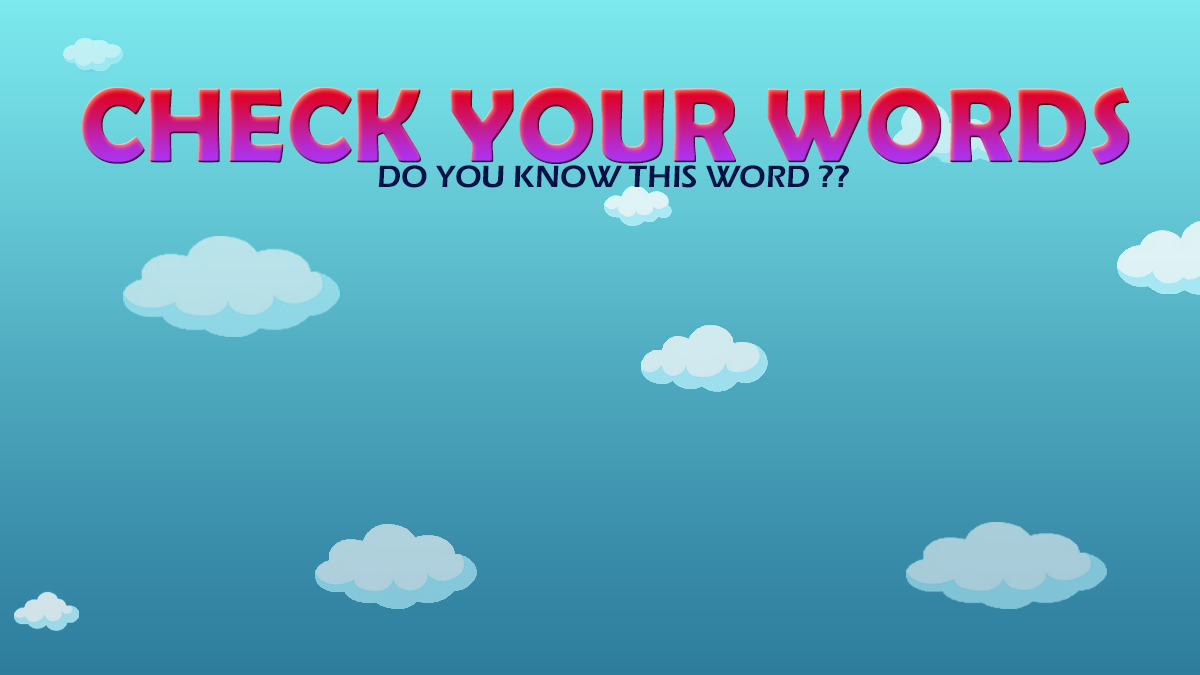
<style>
.page{position:relative;width:1200px;height:675px}
.page>*{position:absolute;margin:0}
.t1{font:107px "BerlinSansFBDemi-Bold";text-transform:uppercase}
.t2{font:32px "ErasITC-Demi";color:#001147;text-transform:uppercase}
</style>
<div class="page">
<p class="t1" style="left:81px;top:86px;width:1049px;height:79px">Check your words</p>
<p class="t2" style="left:378px;top:165px;width:471px;height:23px">do you know this word ??</p>
</div>
